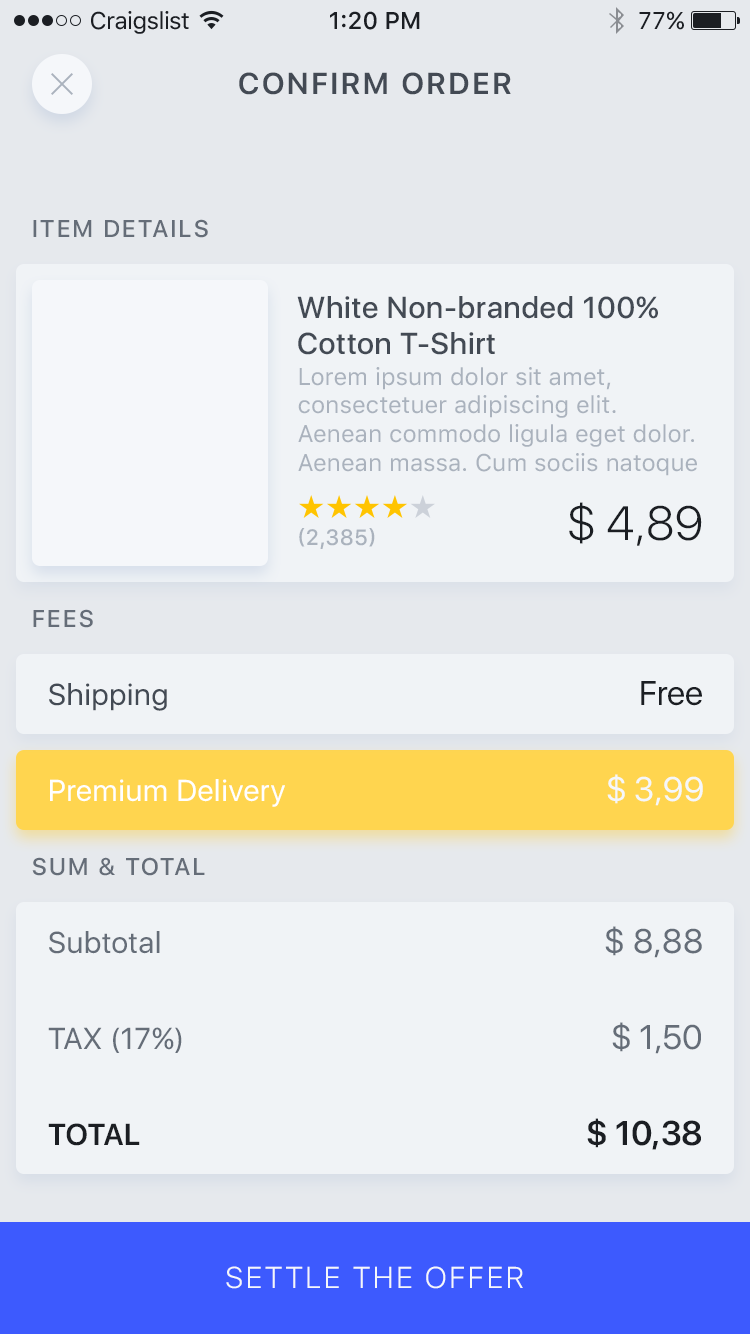
<style>
.page{position:relative;width:750px;height:1334px;background:#f0f3f6}
.page>*{position:absolute;margin:0}
.t1{font:24px "SFUIText-Regular";letter-spacing:-0.025em;color:#1b1e23}
.t2{font:24px "SFUIText-Medium";color:#1b1e23}
.t3{font:24px "SFUIText-Regular";color:#1b1e23}
.t4{font:30px "SFUIDisplay-Semibold";letter-spacing:0.1em;color:#434a54;text-transform:uppercase}
.t5{font:24px "SFUIDisplay-Medium";letter-spacing:0.1em;color:#656d78;text-transform:uppercase}
.t6{font:30px "SFUIDisplay-Medium";letter-spacing:0.025em;color:#434a54}
.t7{font:24px "SFUIText-Regular";color:#aab2bd}
.t8{font:48px "SFUIDisplay-Light";color:#1b1e23}
.t9{font:22px "SFUIText-Medium";color:#aab2bd;text-transform:uppercase}
.t10{font:30px "SFUIDisplay-Regular";letter-spacing:0.025em;color:#434a54}
.t11{font:34px "SFUIDisplay-Regular";color:#1b1e23}
.t12{font:34px "SFUIDisplay-Regular";color:#f5f7fa}
.t13{font:30px "SFUIDisplay-Regular";letter-spacing:0.025em;color:#ffffff}
.t14{font:34px "SFUIDisplay-Regular";color:#656d78}
.t15{font:30px "SFUIDisplay-Regular";letter-spacing:0.025em;color:#656d78}
.t16{font:34px "SFUIDisplay-Semibold";color:#1b1e23}
.t17{font:30px "SFUIDisplay-Semibold";letter-spacing:0.025em;color:#1b1e23}
.t18{font:30px "SFUIDisplay-Light";letter-spacing:0.1em;color:#f5f7fa;text-transform:uppercase}
</style>
<div class="page">
<p class="t1" style="left:91px;top:11px;width:98px;height:23px">Craigslist</p>
<p class="t2" style="left:330px;top:11px;width:90px;height:19px">1:20 PM</p>
<p class="t3" style="left:639px;top:11px;width:45px;height:19px">77%</p>
<p class="t4" style="left:239px;top:72px;width:272px;height:23px">Confirm Order</p>
<p class="t5" style="left:33px;top:219px;width:175px;height:19px">Item details</p>
<p class="t6" style="left:297px;top:296px;width:361px;height:59px">White Non-branded 100% Cotton T-Shirt</p>
<p class="t7" style="left:298px;top:367px;width:399px;height:109px">Lorem ipsum dolor sit amet, consectetuer adipiscing elit. Aenean commodo ligula eget dolor. Aenean massa. Cum sociis natoque penatibus et magnis dis parturient montes, nascetur ridiculus mus.</p>
<p class="t8" style="left:569px;top:502px;width:133px;height:44px">$ 4,89</p>
<p class="t9" style="left:299px;top:528px;width:76px;height:21px">(2,385)</p>
<p class="t5" style="left:33px;top:609px;width:60px;height:19px">Fees</p>
<p class="t10" style="left:49px;top:683px;width:118px;height:28px">Shipping</p>
<p class="t11" style="left:641px;top:681px;width:61px;height:25px">Free</p>
<p class="t12" style="left:607px;top:774px;width:96px;height:32px">$ 3,99</p>
<p class="t13" style="left:50px;top:779px;width:235px;height:28px">Premium Delivery</p>
<p class="t5" style="left:32px;top:857px;width:173px;height:19px">Sum &amp; Total</p>
<p class="t14" style="left:605px;top:926px;width:97px;height:32px">$ 8,88</p>
<p class="t15" style="left:49px;top:931px;width:111px;height:23px">Subtotal</p>
<p class="t14" style="left:612px;top:1022px;width:89px;height:32px">$ 1,50</p>
<p class="t15" style="left:48px;top:1027px;width:134px;height:26px">TAX (17%)</p>
<p class="t16" style="left:587px;top:1118px;width:114px;height:32px">$ 10,38</p>
<p class="t17" style="left:48px;top:1123px;width:92px;height:23px">TOTAL</p>
<p class="t18" style="left:226px;top:1266px;width:297px;height:23px">Settle the offer</p>
</div>
